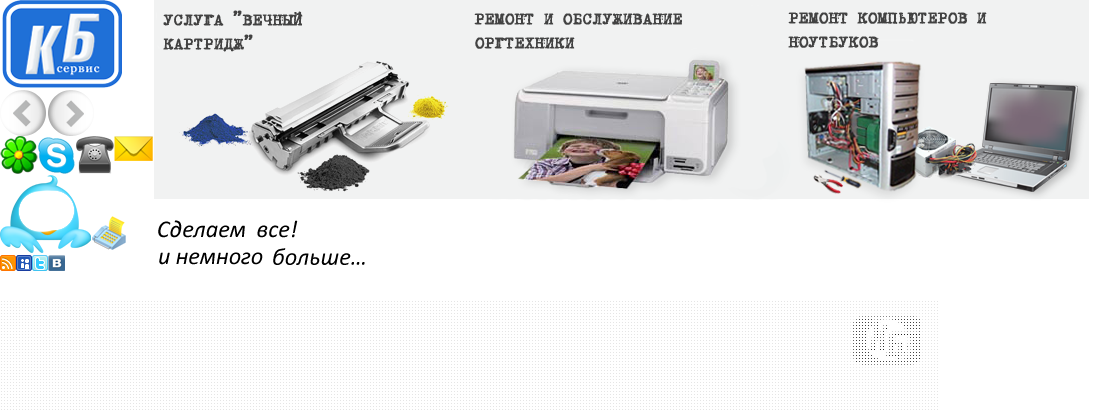
<style>
.page{position:relative;width:1097px;height:410px;background:#ffffff}
.page>*{position:absolute;margin:0}
.t1{font:17.8px/23.7px "B52";color:#424242;font-weight:bold}
</style>
<div class="page">
<p class="t1" style="left:163px;top:10px;width:140px;height:42px">УСЛУГА ”ВЕЧНЫЙ <br>КАРТРИДЖ”</p>
<p class="t1" style="left:474px;top:13px;width:208px;height:36px">РЕМОНТ И ОБСЛУЖИВАНИЕ <br>ОРГТЕХНИКИ</p>
<p class="t1" style="left:788px;top:12px;width:199px;height:36px">РЕМОНТ КОМПЬЮТЕРОВ И <br>НОУТБУКОВ</p>
</div>
